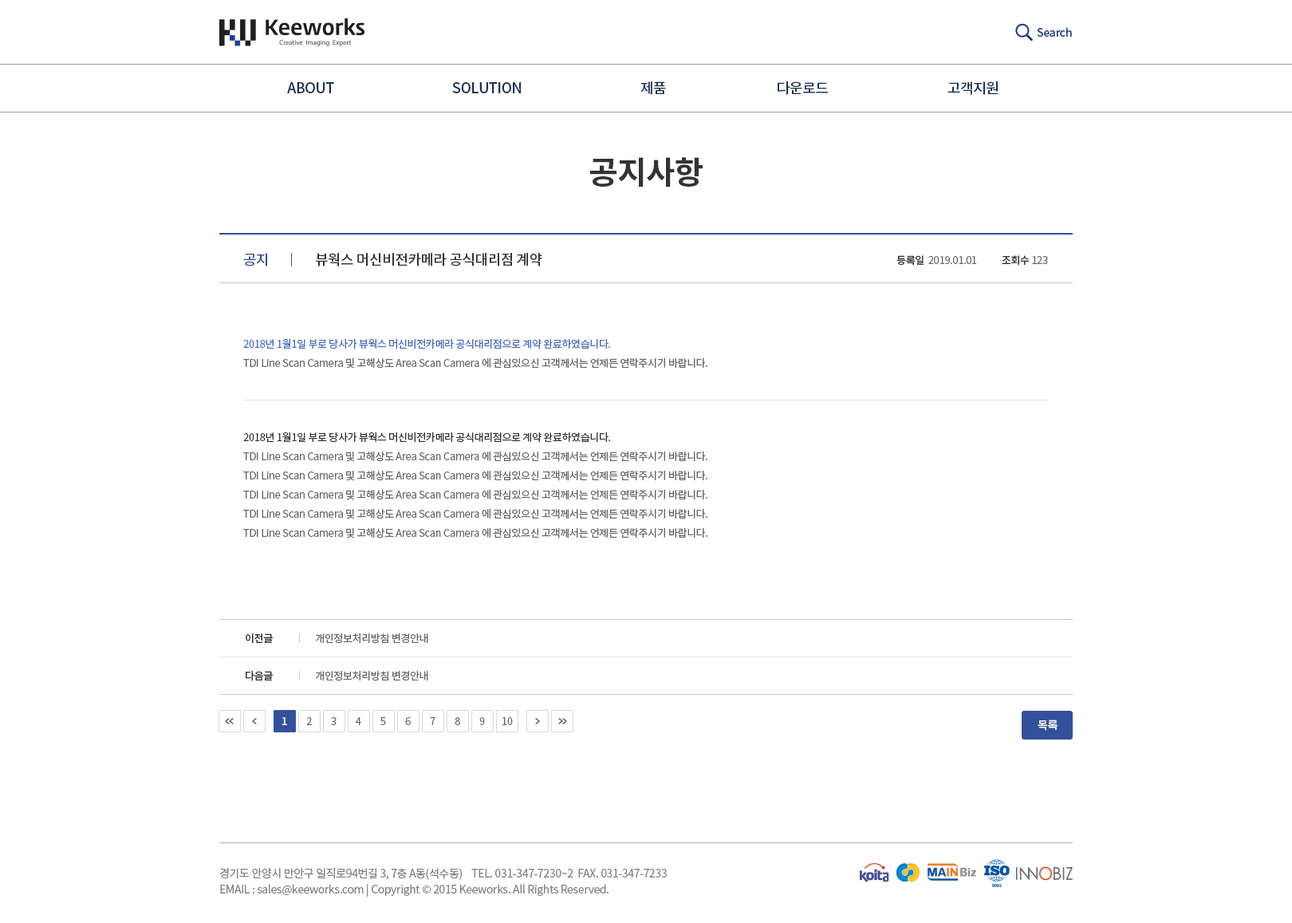
<style>
.page{position:relative;width:1292px;height:923px;background:#ffffff}
.page>*{position:absolute;margin:0}
.t1{font:11.2px "NotoSansCJKkr-Medium";letter-spacing:-0.025em;color:#1b3780}
.t2{font:14.4px "NotoSansCJKkr-Medium";letter-spacing:-0.025em;color:#1c3053;text-transform:uppercase}
.t3{font:31.9px "NotoSansCJKkr-Bold";letter-spacing:-0.025em;color:#333333}
.t4{font:14.4px "NotoSansCJKkr-Medium";letter-spacing:-0.025em;color:#33509c}
.t5{font:14.4px "NotoSansCJKkr-Medium";letter-spacing:-0.025em;color:#333333}
.t6{font:10.4px "NotoSansCJKkr-DemiLight";letter-spacing:-0.025em;color:#666666}
.t7{font:10.4px "NotoSansCJKkr-Medium";letter-spacing:-0.025em;color:#333333}
.t8{font:10.4px/19.1px "NotoSansCJKkr-Regular";letter-spacing:-0.025em;color:#666666}
.t9{font:10.4px/19.1px "NotoSansCJKkr-Regular";letter-spacing:-0.025em;color:#486ac2}
.t10{font:10.4px/19.1px "NotoSansCJKkr-Regular";letter-spacing:-0.025em;color:#333333}
.t11{font:10.4px "NotoSansCJKkr-Regular";letter-spacing:-0.025em;color:#666666}
.t12{font:10.4px "NotoSansCJKkr-Medium";letter-spacing:-0.025em;color:#ffffff}
.t13{font:11.2px "NotoSansCJKkr-Medium";letter-spacing:-0.025em;color:#ffffff}
.t14{font:11.2px/16px "NotoSansCJKkr-Regular";letter-spacing:-0.025em;color:#808080}
</style>
<div class="page">
<p class="t1" style="left:1037px;top:27px;width:35px;height:10px">Search</p>
<p class="t2" style="left:287px;top:82px;width:47px;height:11px">ABOUT</p>
<p class="t2" style="left:452px;top:82px;width:70px;height:11px">SOLUTION</p>
<p class="t2" style="left:640px;top:81px;width:26px;height:14px">제품</p>
<p class="t2" style="left:778px;top:81px;width:50px;height:14px">다운로드</p>
<p class="t2" style="left:948px;top:81px;width:51px;height:14px">고객지원</p>
<p class="t3" style="left:589px;top:157px;width:114px;height:30px">공지사항</p>
<p class="t4" style="left:243px;top:253px;width:24px;height:13px">공지</p>
<p class="t5" style="left:316px;top:253px;width:226px;height:13px">뷰웍스 머신비전카메라 공식대리점 계약</p>
<p class="t6" style="left:897px;top:255px;width:151px;height:11px"><span class="t7">등록일</span>  2019.01.01            <span class="t7">조회수</span> 123</p>
<p class="t8" style="left:243px;top:338px;width:464px;height:30px"><span class="t9">2018년 1월1일 부로 당사가 뷰웍스 머신비전카메라 공식대리점으로 계약 완료하였습니다.<br></span>TDI Line Scan Camera 및 고해상도 Area Scan Camera 에 관심있으신 고객께서는 언제든 연락주시기 바랍니다.</p>
<p class="t8" style="left:243px;top:432px;width:464px;height:106px"><span class="t10">2018년 1월1일 부로 당사가 뷰웍스 머신비전카메라 공식대리점으로 계약 완료하였습니다. <br></span>TDI Line Scan Camera 및 고해상도 Area Scan Camera 에 관심있으신 고객께서는 언제든 연락주시기 바랍니다.<br>TDI Line Scan Camera 및 고해상도 Area Scan Camera 에 관심있으신 고객께서는 언제든 연락주시기 바랍니다.<br>TDI Line Scan Camera 및 고해상도 Area Scan Camera 에 관심있으신 고객께서는 언제든 연락주시기 바랍니다.<br>TDI Line Scan Camera 및 고해상도 Area Scan Camera 에 관심있으신 고객께서는 언제든 연락주시기 바랍니다.<br>TDI Line Scan Camera 및 고해상도 Area Scan Camera 에 관심있으신 고객께서는 언제든 연락주시기 바랍니다.</p>
<p class="t7" style="left:246px;top:633px;width:27px;height:11px">이전글</p>
<p class="t11" style="left:315px;top:633px;width:113px;height:11px">개인정보처리방침 변경안내</p>
<p class="t7" style="left:246px;top:670px;width:27px;height:11px">다음글</p>
<p class="t11" style="left:315px;top:670px;width:113px;height:11px">개인정보처리방침 변경안내</p>
<p class="t12" style="left:282px;top:717px;width:5px;height:8px">1</p>
<p class="t11" style="left:306px;top:717px;width:6px;height:8px">2</p>
<p class="t11" style="left:331px;top:717px;width:6px;height:8px">3</p>
<p class="t11" style="left:355px;top:717px;width:6px;height:8px">4</p>
<p class="t11" style="left:380px;top:717px;width:6px;height:8px">5</p>
<p class="t11" style="left:405px;top:717px;width:6px;height:8px">6</p>
<p class="t11" style="left:430px;top:717px;width:5px;height:8px">7</p>
<p class="t11" style="left:455px;top:717px;width:5px;height:8px">8</p>
<p class="t11" style="left:479px;top:717px;width:6px;height:8px">9</p>
<p class="t11" style="left:502px;top:717px;width:11px;height:8px">10</p>
<p class="t13" style="left:1038px;top:719px;width:20px;height:12px">목록</p>
<p class="t14" style="left:220px;top:868px;width:447px;height:29px">경기도 안양시 만안구 일직로94번길 3, 7층 A동(석수동)    TEL. 031-347-7230~2  FAX. 031-347-7233<br>EMAIL : sales@keeworks.com | Copyright © 2015 Keeworks. All Rights Reserved.</p>
</div>
